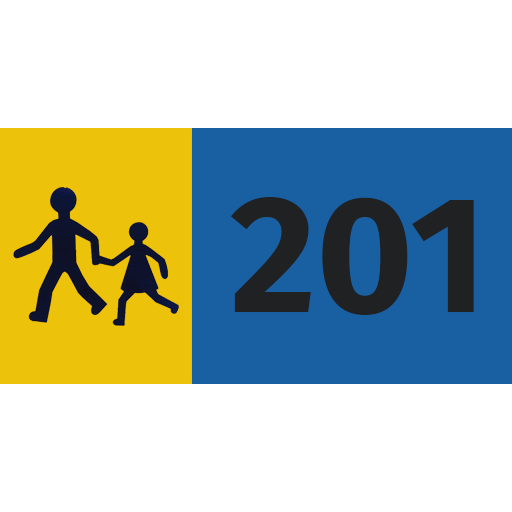
<style>
.page{position:relative;width:512px;height:512px;background:#ffffff}
.page>*{position:absolute;margin:0}
.t1{font:166.7px "FiraSans-Bold";color:#1f2123}
</style>
<div class="page">
<p class="t1" style="left:231px;top:197px;width:243px;height:118px">201</p>
</div>
